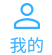
<style>
.page{position:relative;width:52px;height:55px;background:#ffffff}
.page>*{position:absolute;margin:0}
.t1{font:17.3px "SourceHanSansCN-Regular";color:#34afff}
</style>
<div class="page">
<p class="t1" style="left:10px;top:37px;width:33px;height:16px">我的</p>
</div>
